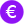
<style>
.page{position:relative;width:24px;height:24px;background:#8f13f5}
.page>*{position:absolute;margin:0}
.t1{font:18px "FuturaBT-Medium";color:#ffffff}
</style>
<div class="page">
<p class="t1" style="left:5px;top:5px;width:12px;height:13px">€</p>
</div>
